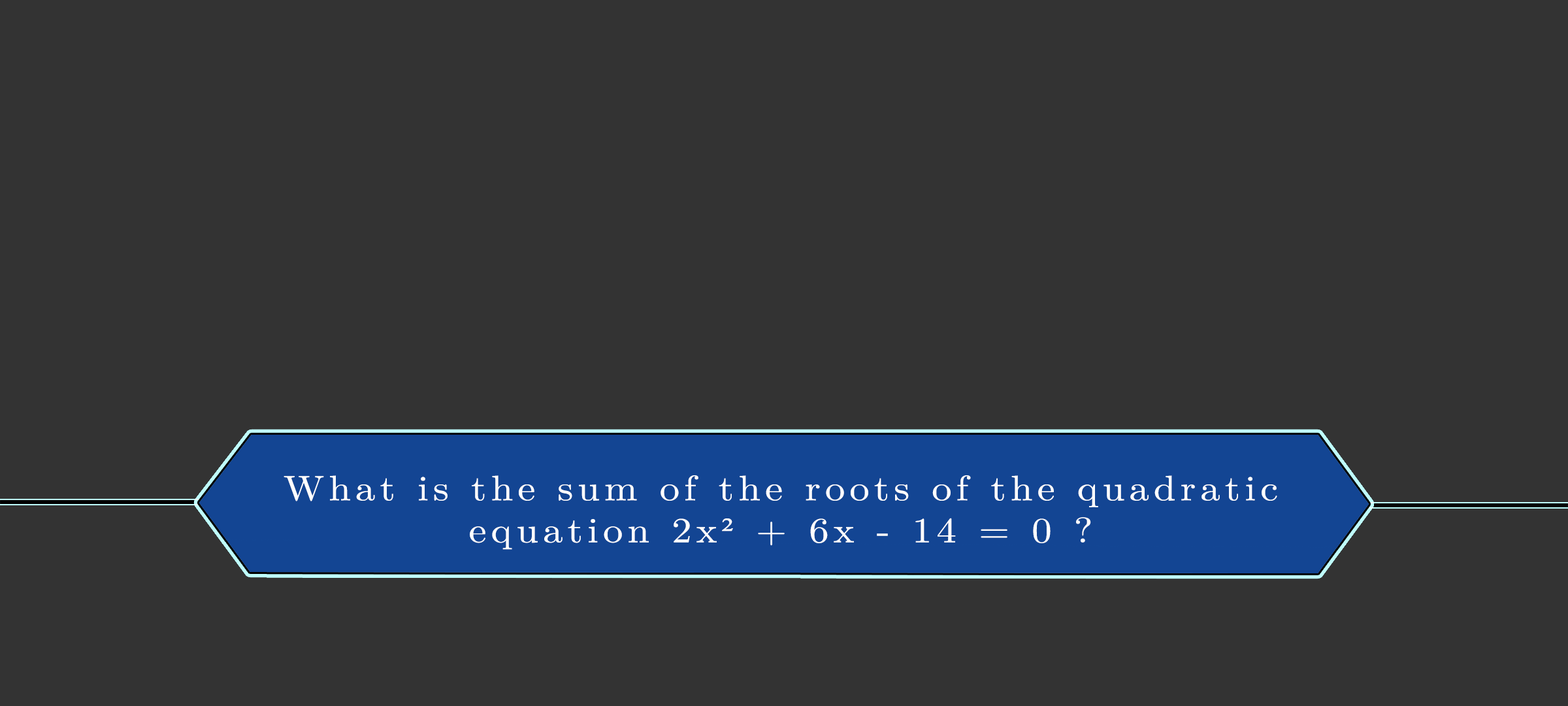
<style>
.page{position:relative;width:1568px;height:706px;background:#333333}
.page>*{position:absolute;margin:0}
.t1{font:35.4px/42px "LatinModernMath-Regular";letter-spacing:0.115em;color:#ffffff;scale:1.12 1}
.t2{font:35.4px/42px "TimesNewRomanPSMT";letter-spacing:0.115em;color:#ffffff;scale:1.12 1}
</style>
<div class="page">
<p class="t1" style="left:284px;top:475px;width:993px;height:74px;text-align:center">What is the sum of the roots of the quadratic<br>equation 2x<span class="t2">²</span> + 6x - 14 = 0 ?</p>
</div>
